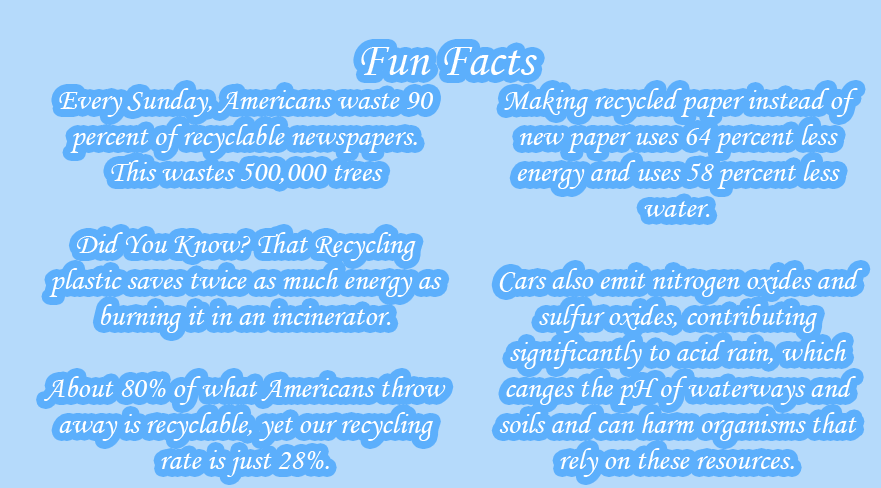
<style>
.page{position:relative;width:881px;height:488px;background:#b5dafb}
.page>*{position:absolute;margin:0}
.t1{font:48px "MonotypeCorsiva";color:#ffffff}
.t2{font:30px "MonotypeCorsiva";color:#ffffff}
</style>
<div class="page">
<p class="t1" style="left:361px;top:47px;width:176px;height:28px">Fun Facts</p>
<p class="t2" style="left:44px;top:88px;width:402px;height:389px;text-align:center">Every Sunday, Americans waste 90 percent of recyclable newspapers. <br>This wastes 500,000 trees<br><br>Did You Know? That Recycling plastic saves twice as much energy as burning it in an incinerator.<br><br>About 80% of what Americans throw away is recyclable, yet our recycling rate is just 28%.</p>
<p class="t2" style="left:499px;top:88px;width:364px;height:389px;text-align:center">Making recycled paper instead of new paper uses 64 percent less energy and uses 58 percent less water.<br><br>Cars also emit nitrogen oxides and sulfur oxides, contributing significantly to acid rain, which canges the pH of waterways and soils and can harm organisms that rely on these resources.</p>
</div>
